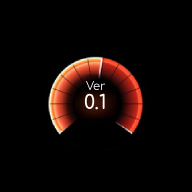
<style>
.page{position:relative;width:192px;height:192px;background:#000000}
.page>*{position:absolute;margin:0}
.t1{font:11.7px "Comfortaa-Regular"}
.t2{font:19.6px "Comfortaa-SemiBold";color:#ffffff}
</style>
<div class="page">
<p class="t1" style="left:86px;top:81px;width:20px;height:9px">Ver</p>
<p class="t2" style="left:84px;top:93px;width:21px;height:17px">0.1</p>
</div>
